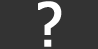
<style>
.page{position:relative;width:98px;height:49px;background:#333333}
.page>*{position:absolute;margin:0}
.t1{font:60px "Tahoma";color:#ffffff;text-transform:uppercase;font-weight:bold;scale:0.92 1}
</style>
<div class="page">
<p class="t1" style="left:38px;top:1px;width:24px;height:46px">?</p>
</div>
